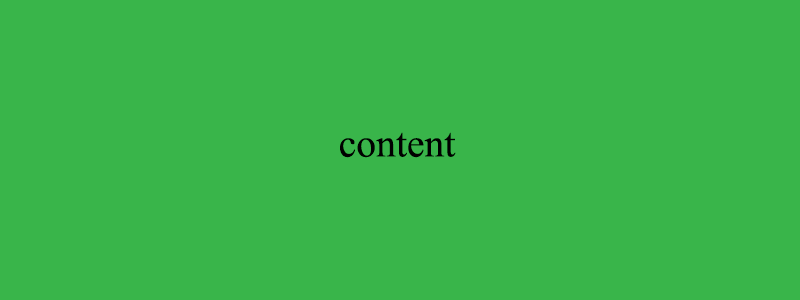
<style>
.page{position:relative;width:800px;height:300px;background:#39b54a}
.page>*{position:absolute;margin:0}
.t1{font:60px "AngsanaNew";color:#000000}
</style>
<div class="page">
<p class="t1" style="left:340px;top:132px;width:116px;height:26px">content</p>
</div>
